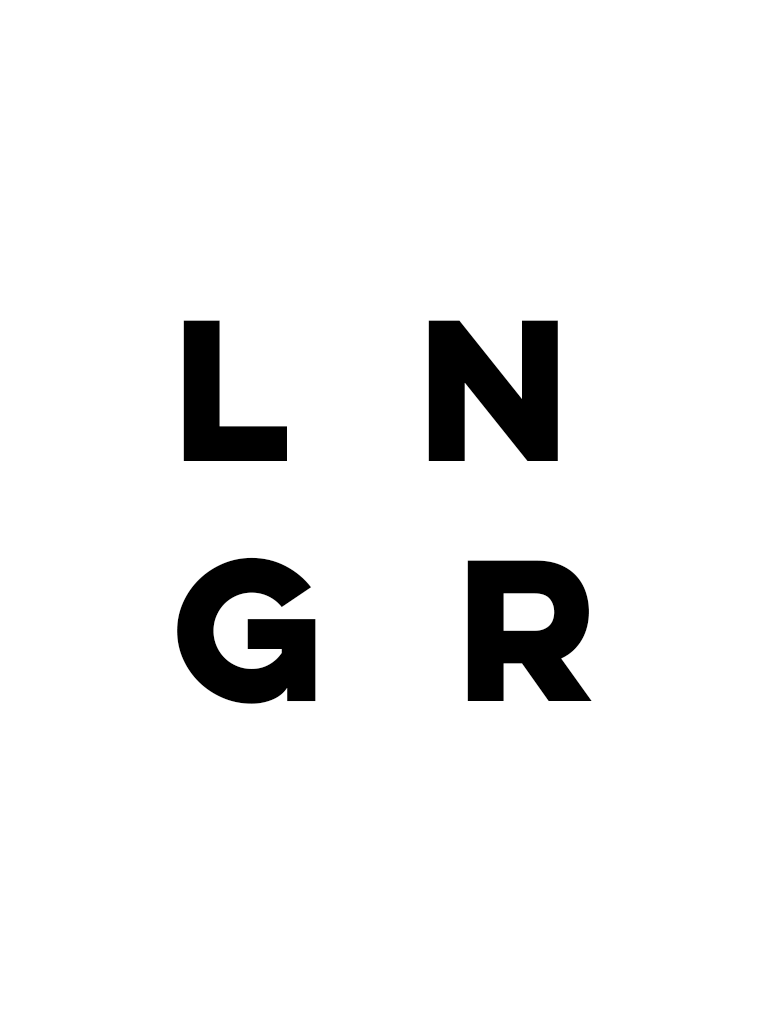
<style>
.page{position:relative;width:768px;height:1024px;background:#ffffff}
.page>*{position:absolute;margin:0}
.t1{font:180px "LuloCleanW01-OneBold";color:#000000}
</style>
<div class="page">
<p class="t1" style="left:177px;top:320px;width:415px;height:384px">l n<br>g r</p>
</div>
